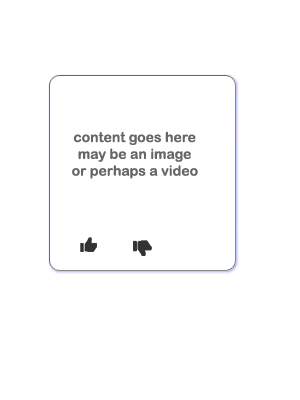
<style>
.page{position:relative;width:300px;height:400px;background:#ffffff}
.page>*{position:absolute;margin:0}
.t1{font:14px "ArialRoundedMTBold";color:#666666}
</style>
<div class="page">
<p class="t1" style="left:72px;top:131px;width:126px;height:48px;text-align:center">content goes here<br>may be an image<br>or perhaps a video</p>
</div>
